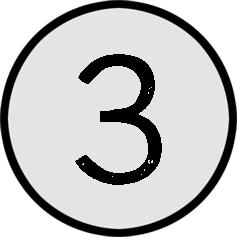
<style>
.page{position:relative;width:237px;height:237px;background:#e4e4e4}
.page>*{position:absolute;margin:0}
.t1{font:137.6px "RepriseStampStd";color:#000000}
.t2{font:45.9px "RepriseStampStd";color:#000000}
</style>
<div class="page">
<p class="t1" style="left:75px;top:54px;width:87px;height:131px"><span class="t2"><br></span>3</p>
</div>
